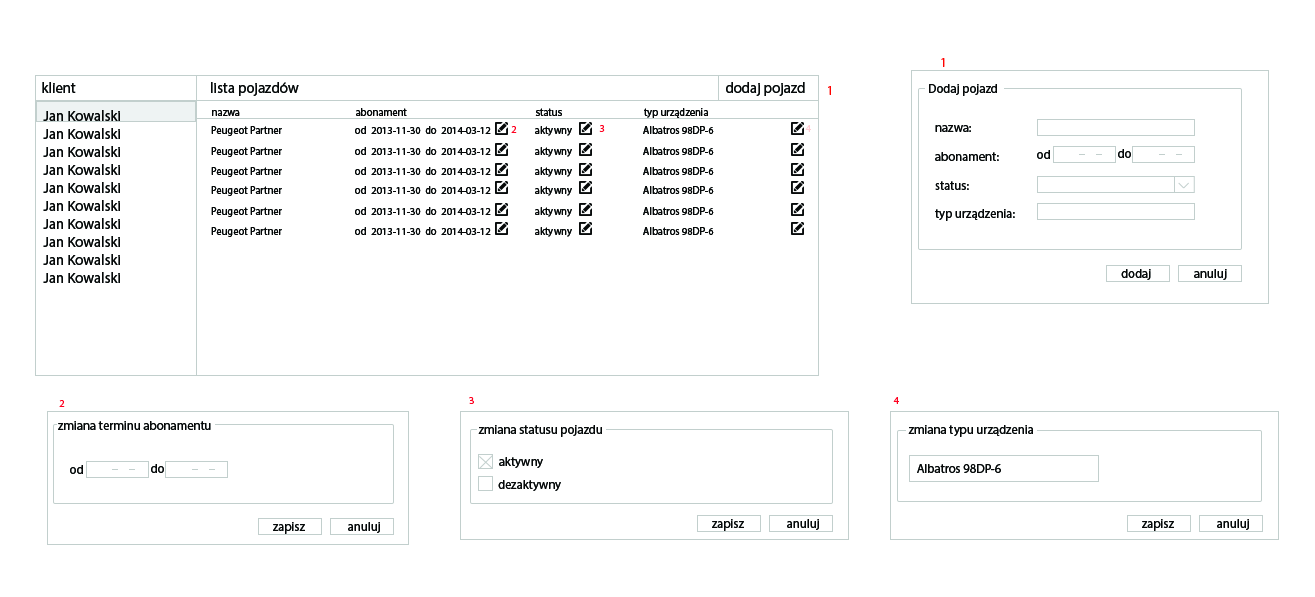
<style>
.page{position:relative;width:1315px;height:597px;background:#ffffff}
.page>*{position:absolute;margin:0}
.t1{font:12.6px "MyriadPro-Regular";color:#ff0200}
.t2{font:14.7px "MyriadPro-Regular";color:#060808}
.t3{font:12.6px "MyriadPro-Regular";color:#060808}
.t4{font:14.7px/18px "MyriadPro-Regular";color:#060808}
.t5{font:10.5px "MyriadPro-Regular";color:#060808}
.t6{font:10.5px "MyriadPro-Regular";color:#ff0120}
.t7{font:10.5px "MyriadPro-Regular";color:#ffccd2}
</style>
<div class="page">
<p class="t1" style="left:941px;top:58px;width:4px;height:9px">1</p>
<p class="t2" style="left:42px;top:82px;width:763px;height:14px">klient            lista pojazdów            dodaj pojazd</p>
<p class="t1" style="left:828px;top:86px;width:3px;height:9px">1</p>
<p class="t3" style="left:929px;top:84px;width:68px;height:12px">Dodaj pojazd</p>
<p class="t4" style="left:43px;top:110px;width:77px;height:173px">Jan Kowalski<br>Jan Kowalski<br>Jan Kowalski<br>Jan Kowalski<br>Jan Kowalski<br>Jan Kowalski<br>Jan Kowalski<br>Jan Kowalski<br>Jan Kowalski<br>Jan Kowalski</p>
<p class="t5" style="left:212px;top:108px;width:496px;height:10px">nazwa    abonament    status   typ urządzenia</p>
<p class="t5" style="left:211px;top:126px;width:503px;height:10px">Peugeot Partner   od  2013-11-30  do  2014-03-12  aktywny  Albatros 98DP-6</p>
<p class="t6" style="left:511px;top:126px;width:6px;height:7px">2</p>
<p class="t6" style="left:599px;top:125px;width:6px;height:7px">3</p>
<p class="t7" style="left:805px;top:125px;width:6px;height:7px">4</p>
<p class="t3" style="left:935px;top:125px;width:80px;height:96px">nazwa:<br><br>abonament:<br><br>status:<br><br>typ urządzenia:</p>
<p class="t5" style="left:211px;top:147px;width:503px;height:10px">Peugeot Partner   od  2013-11-30  do  2014-03-12  aktywny  Albatros 98DP-6</p>
<p class="t3" style="left:1037px;top:150px;width:13px;height:9px">od</p>
<p class="t3" style="left:1118px;top:149px;width:13px;height:9px">do</p>
<p class="t5" style="left:211px;top:167px;width:503px;height:10px">Peugeot Partner   od  2013-11-30  do  2014-03-12  aktywny  Albatros 98DP-6</p>
<p class="t5" style="left:211px;top:186px;width:503px;height:10px">Peugeot Partner   od  2013-11-30  do  2014-03-12  aktywny  Albatros 98DP-6</p>
<p class="t5" style="left:211px;top:207px;width:503px;height:10px">Peugeot Partner   od  2013-11-30  do  2014-03-12  aktywny  Albatros 98DP-6</p>
<p class="t5" style="left:211px;top:227px;width:503px;height:10px">Peugeot Partner   od  2013-11-30  do  2014-03-12  aktywny  Albatros 98DP-6</p>
<p class="t3" style="left:1121px;top:269px;width:106px;height:11px">dodaj                anuluj</p>
<p class="t6" style="left:59px;top:400px;width:6px;height:7px">2</p>
<p class="t6" style="left:469px;top:397px;width:5px;height:7px">3</p>
<p class="t6" style="left:893px;top:397px;width:6px;height:7px">4</p>
<p class="t3" style="left:58px;top:421px;width:153px;height:9px">zmiana terminu abonamentu</p>
<p class="t3" style="left:478px;top:425px;width:124px;height:12px">zmiana statusu pojazdu</p>
<p class="t3" style="left:908px;top:425px;width:125px;height:12px">zmiana typu urządzenia</p>
<p class="t3" style="left:499px;top:457px;width:44px;height:11px">aktywny</p>
<p class="t3" style="left:70px;top:465px;width:13px;height:9px">od</p>
<p class="t3" style="left:151px;top:464px;width:13px;height:9px">do</p>
<p class="t3" style="left:917px;top:464px;width:84px;height:9px">Albatros 98DP-6</p>
<p class="t3" style="left:498px;top:480px;width:63px;height:11px">dezaktywny</p>
<p class="t3" style="left:712px;top:519px;width:107px;height:12px">zapisz                anuluj</p>
<p class="t3" style="left:1142px;top:519px;width:107px;height:12px">zapisz                anuluj</p>
<p class="t3" style="left:273px;top:522px;width:107px;height:12px">zapisz                anuluj</p>
</div>
